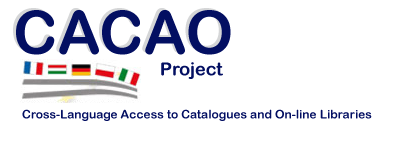
<style>
.page{position:relative;width:400px;height:152px;background:#ffffff}
.page>*{position:absolute;margin:0}
.t1{font:60px "ArialRoundedMTBold"}
.t2{font:12px "ArialRoundedMTBold";color:#030f62}
.t3{font:60px "ArialRoundedMTBold";color:#030f62}
.t4{font:18px "ArialRoundedMTBold";color:#030f62}
</style>
<div class="page">
<p class="t1" style="left:13px;top:8px;width:215px;height:45px">CACAO</p>
<p class="t2" style="left:16px;top:10px;width:356px;height:111px"><span class="t3">CACAO<br>                                          </span><span class="t4">Project<br><br></span>   Cross-Language Access to Catalogues and On-line Libraries</p>
</div>
